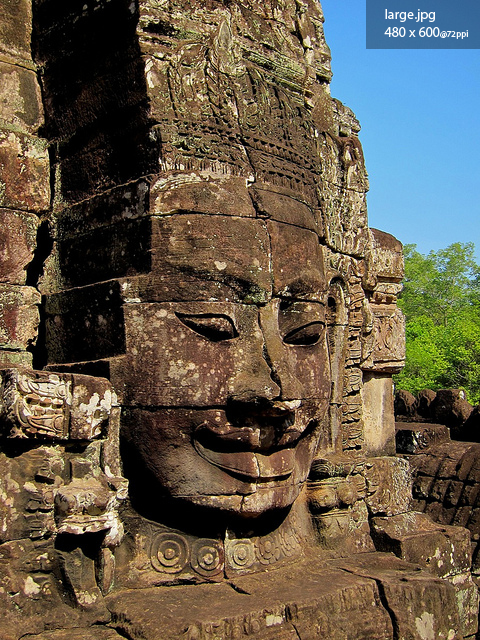
<style>
.page{position:relative;width:480px;height:640px}
.page>*{position:absolute;margin:0}
.t1{font:14px/18px "MyriadPro-Regular";color:#ffffff}
.t2{font:9px/18px "MyriadPro-Regular";color:#ffffff}
</style>
<div class="page">
<p class="t1" style="left:384px;top:9px;width:84px;height:30px">large.jpg<br>480 x 600<span class="t2">@72ppi</span></p>
</div>
